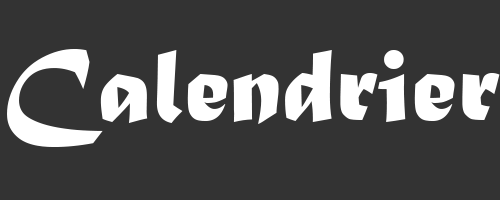
<style>
.page{position:relative;width:500px;height:200px;background:#333333}
.page>*{position:absolute;margin:0}
.t1{font:109px "MaturaMTScriptCapitals";color:#ffffff}
</style>
<div class="page">
<p class="t1" style="left:7px;top:49px;width:493px;height:98px">Calendrier</p>
</div>
